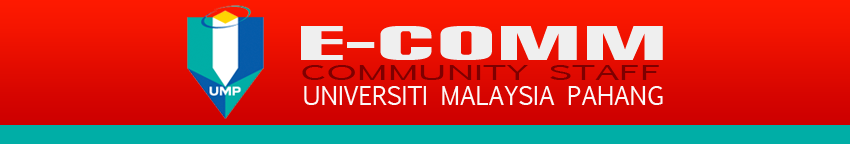
<style>
.page{position:relative;width:850px;height:144px}
.page>*{position:absolute;margin:0}
.t1{font:43.7px "ARubricaCnBold";color:#efefef;scale:2.57 1}
.t2{font:19.6px "EuphemiaCAS";color:#7e0000;scale:2.01 1}
.t3{font:25px "EuphemiaCAS";color:#fcf8f8}
</style>
<div class="page">
<p class="t1" style="left:301px;top:26px;width:362px;height:34px">E-COMM</p>
<p class="t2" style="left:302px;top:65px;width:357px;height:15px">COMMUNITY STAFF</p>
<p class="t3" style="left:304px;top:86px;width:359px;height:19px">UNIVERSITI MALAYSIA PAHANG</p>
</div>
